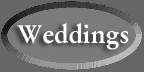
<style>
.page{position:relative;width:144px;height:72px}
.page>*{position:absolute;margin:0}
.t1{font:26px "Garamond-Halbfett";color:#ffffff}
</style>
<div class="page">
<p class="t1" style="left:17px;top:23px;width:112px;height:27px">Weddings</p>
</div>
